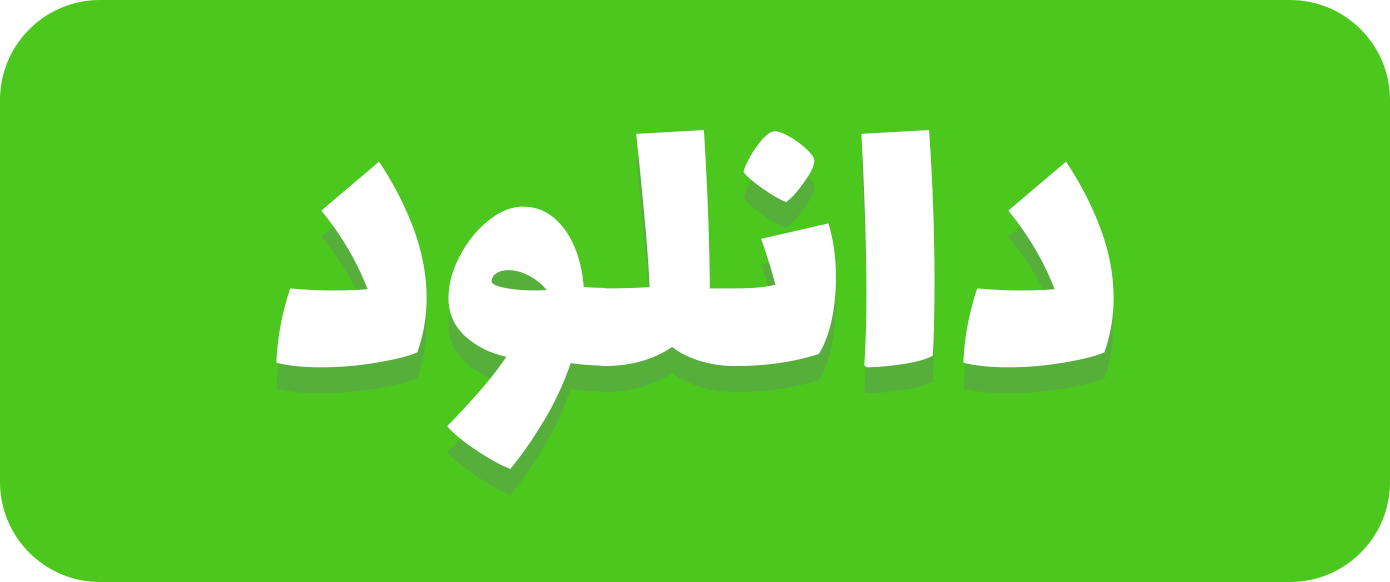
<style>
.page{position:relative;width:1390px;height:582px;background:#4cc71e}
.page>*{position:absolute;margin:0}
.t1{font:416.7px "Lalezar-Regular";color:#ffffff}
</style>
<div class="page">
<p class="t1" style="left:276px;top:130px;width:838px;height:339px">دانلود</p>
<p class="t1" style="left:276px;top:156px;width:838px;height:339px">دانلود</p>
</div>
